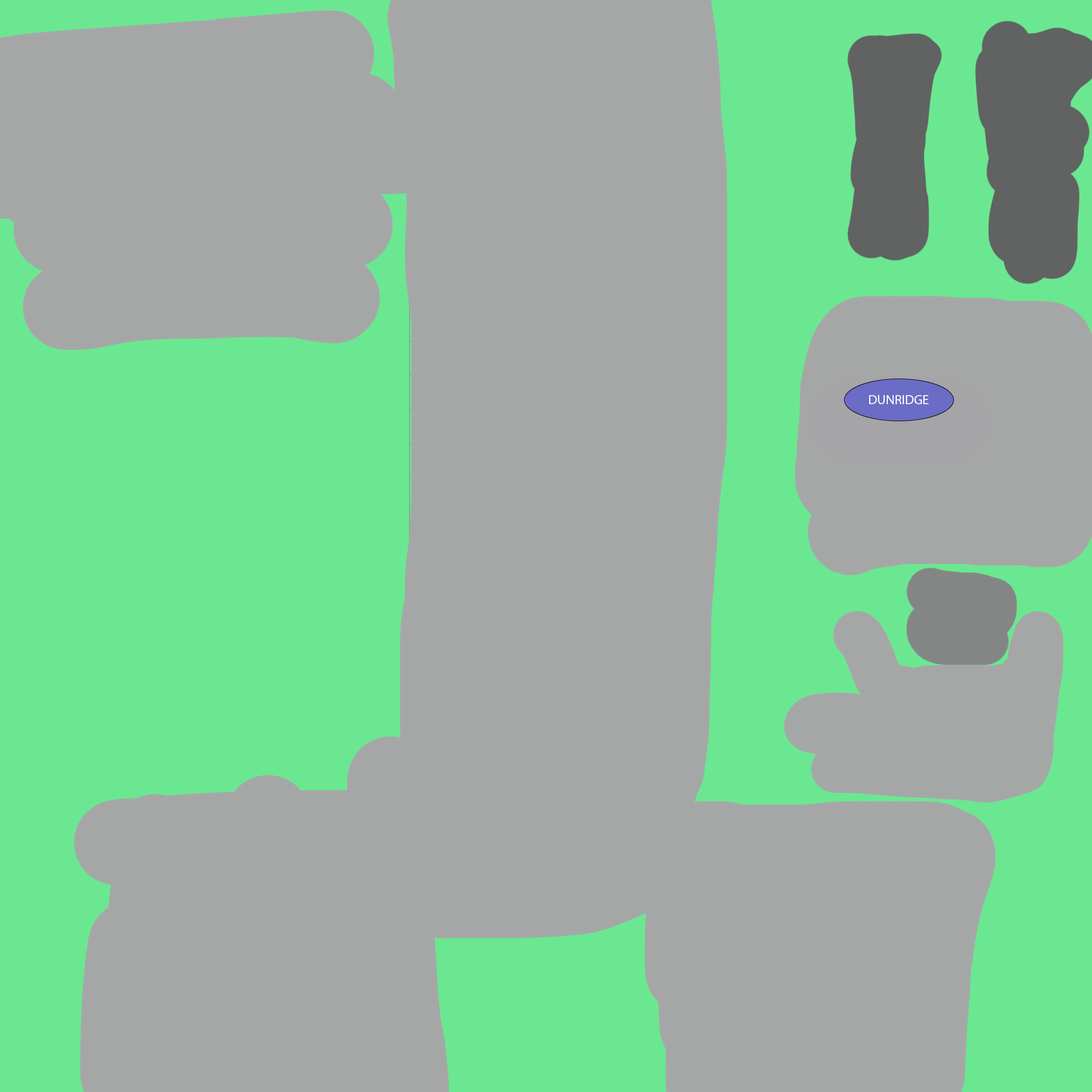
<style>
.page{position:relative;width:1092px;height:1092px;background:#a5a7a6}
.page>*{position:absolute;margin:0}
.t1{font:13.3px "MyriadPro-Regular";color:#ffffff}
</style>
<div class="page">
<p class="t1" style="left:869px;top:395px;width:60px;height:9px">DUNRIDGE</p>
</div>
